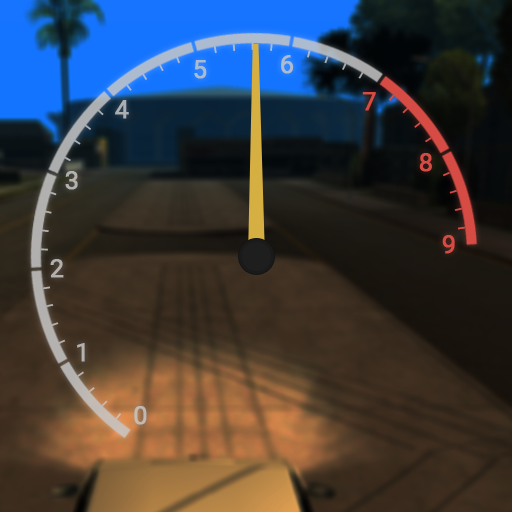
<style>
.page{position:relative;width:512px;height:512px}
.page>*{position:absolute;margin:0}
.t1{font:25px "Roboto-Regular";color:#adbbd0;font-weight:bold}
.t2{font:25px "Roboto-Regular";color:#acafb2;font-weight:bold}
.t3{font:25px "Roboto-Regular";color:#d64c45;font-weight:bold}
.t4{font:25px "Roboto-Regular";color:#c8c8c8;font-weight:bold}
.t5{font:25px "Roboto-Regular";color:#b2b0af;font-weight:bold}
.t6{font:25px "Roboto-Regular";color:#b4b1af;font-weight:bold}
</style>
<div class="page">
<p class="t1" style="left:194px;top:60px;width:13px;height:19px">5</p>
<p class="t1" style="left:281px;top:55px;width:13px;height:19px">6</p>
<p class="t2" style="left:115px;top:100px;width:14px;height:19px">4</p>
<p class="t3" style="left:362px;top:92px;width:14px;height:19px">7</p>
<p class="t3" style="left:419px;top:153px;width:13px;height:19px">8</p>
<p class="t4" style="left:65px;top:171px;width:13px;height:19px">3</p>
<p class="t3" style="left:442px;top:235px;width:13px;height:19px">9</p>
<p class="t5" style="left:50px;top:259px;width:14px;height:19px">2</p>
<p class="t6" style="left:77px;top:343px;width:8px;height:19px">1</p>
<p class="t4" style="left:134px;top:406px;width:13px;height:19px">0</p>
</div>
